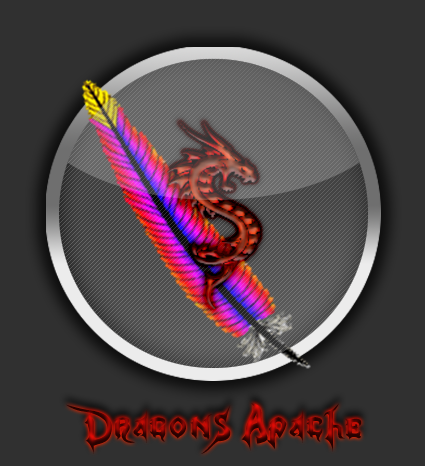
<style>
.page{position:relative;width:425px;height:466px;background:#303030}
.page>*{position:absolute;margin:0}
.t1{font:72px "KingdomHearts"}
</style>
<div class="page">
<p class="t1" style="left:66px;top:403px;width:296px;height:51px">Dragons Apache</p>
</div>
